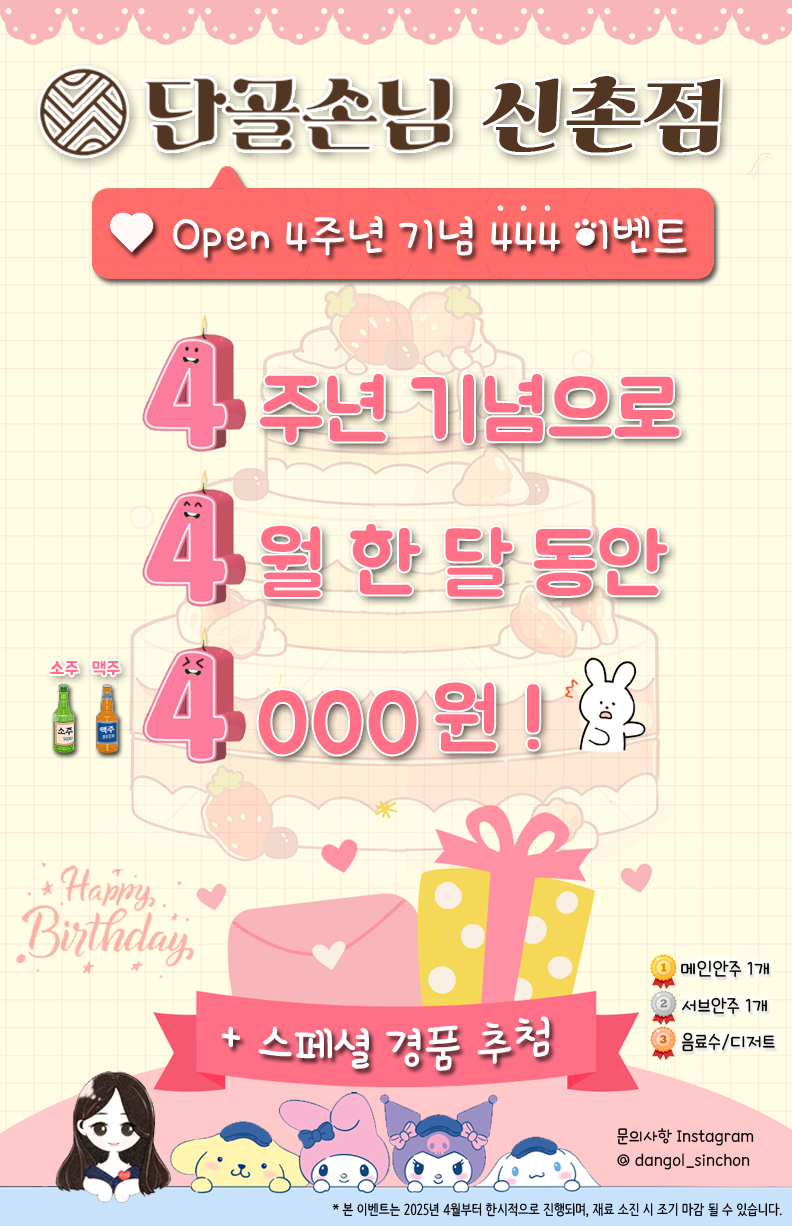
<style>
.page{position:relative;width:792px;height:1226px;background:#fffde4}
.page>*{position:absolute;margin:0}
.t1{font:82px "ghanachoco";color:#533621}
.t2{font:48px "DXcutecute";color:#fffefe}
.t3{font:84px "Pix_BMJUAOTF";color:#ff7086}
.t4{font:18px "Pix_BMJUAOTF";color:#ff7086}
.t5{font:90px "Pix_BMJUAOTF";color:#ff7086}
.t6{font:20px "icTTHayanbunpilL";color:#000000}
.t7{font:18px "icTTHayanbunpilL";color:#000000}
.t8{font:14px "Pix_NanumBarunpen";color:#000000}
</style>
<div class="page">
<p class="t1" style="left:482px;top:76px;width:239px;height:77px">신촌점</p>
<p class="t2" style="left:173px;top:216px;width:514px;height:42px">Open 4주년 기념 444 이벤트</p>
<p class="t3" style="left:260px;top:374px;width:420px;height:70px">주년 기념으로</p>
<p class="t3" style="left:261px;top:523px;width:407px;height:74px">월 한 달 동안</p>
<p class="t4" style="left:50px;top:660px;width:70px;height:16px">소주   맥주</p>
<p class="t3" style="left:435px;top:682px;width:105px;height:70px">원 !</p>
<p class="t5" style="left:258px;top:690px;width:159px;height:65px">000</p>
<p class="t6" style="left:681px;top:960px;width:88px;height:17px">메인안주 1개</p>
<p class="t6" style="left:682px;top:997px;width:85px;height:17px">서브안주 1개</p>
<p class="t2" style="left:221px;top:1016px;width:329px;height:55px">+ 스페셜 경품 추첨</p>
<p class="t6" style="left:681px;top:1032px;width:94px;height:20px">음료수/디저트</p>
<p class="t7" style="left:617px;top:1128px;width:137px;height:18px">문의사항 Instagram</p>
<p class="t7" style="left:617px;top:1153px;width:133px;height:17px">@ dangol_sinchon</p>
<p class="t8" style="left:332px;top:1203px;width:450px;height:14px">* 본 이벤트는 2025년 4월부터 한시적으로 진행되며, 재료 소진 시 조기 마감 될 수 있습니다.</p>
</div>
